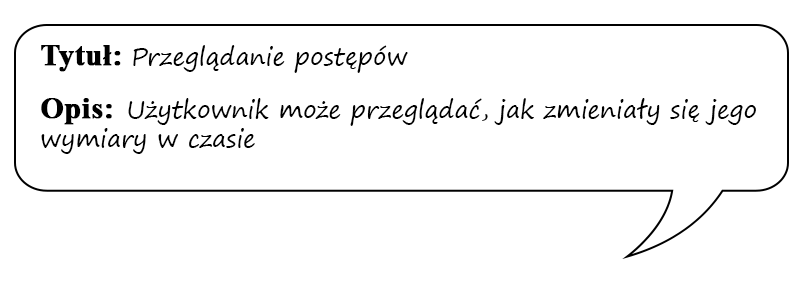
<style>
.page{position:relative;width:800px;height:307px;background:#ffffff}
.page>*{position:absolute;margin:0}
.t1{font:24px "SegoePrint";color:#000000}
.t2{font:30px "TimesNewRomanPS-BoldMT";color:#000000;font-weight:bold}
</style>
<div class="page">
<p class="t1" style="left:41px;top:45px;width:715px;height:109px"><span class="t2">Tytuł: </span>Przeglądanie postępów<br><br><span class="t2">Opis:  </span>Użytkownik może przeglądać, jak zmieniały się jego wymiary w czasie</p>
</div>
